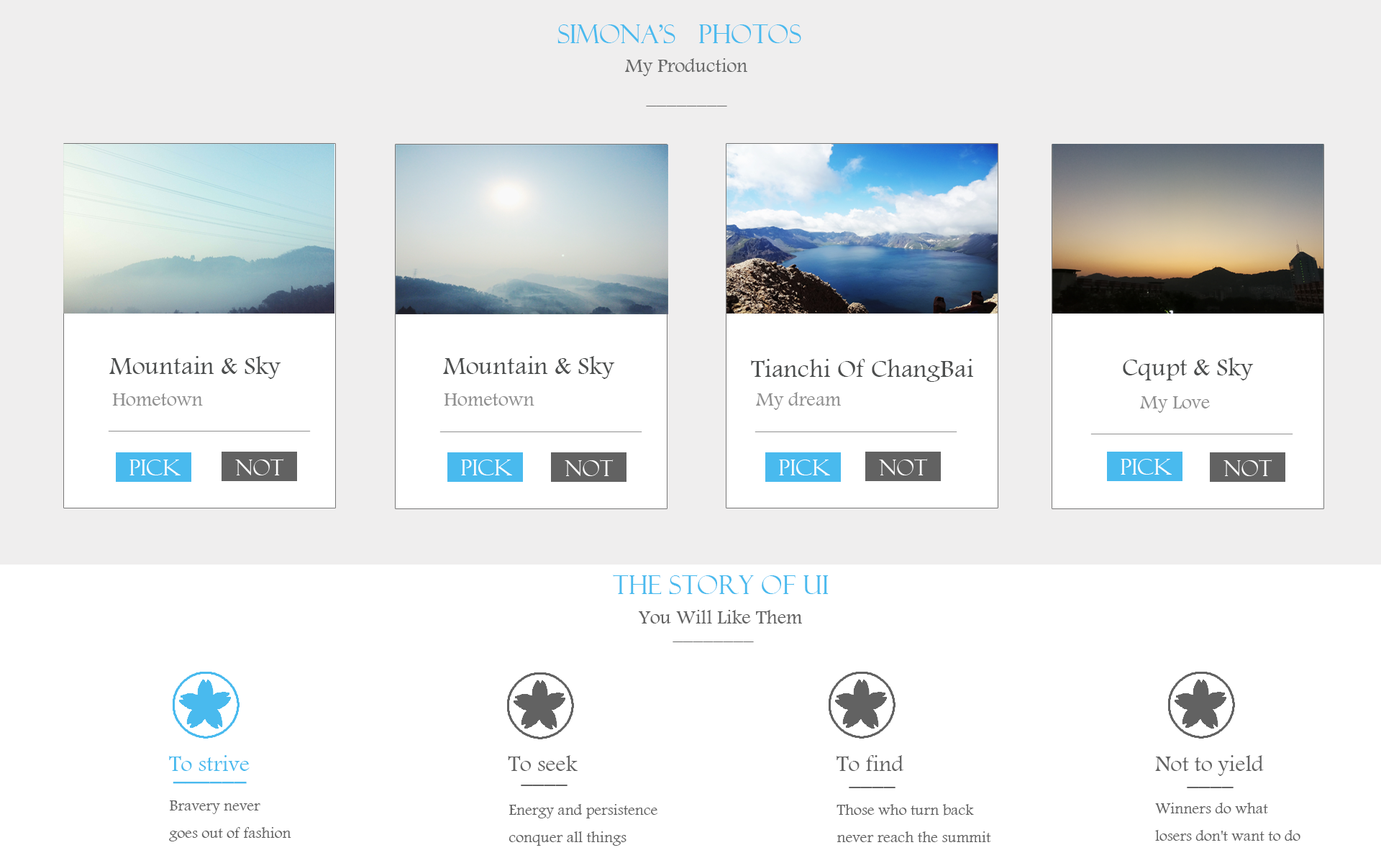
<style>
.page{position:relative;width:1381px;height:863px;background:#ffffff}
.page>*{position:absolute;margin:0}
.t1{font:25.9px "FelixTitlingMT";color:#49baee}
.t2{font:20.1px "FootlightMTLight";color:#686969}
.t3{font:25.9px "FootlightMTLight";color:#4c4e4e}
.t4{font:20.1px "FootlightMTLight";color:#909090}
.t5{font:20.1px "FootlightMTLight";color:#626262}
.t6{font:23px "FootlightMTLight";color:#49baee}
.t7{font:23px "FootlightMTLight";color:#626262}
.t8{font:23px "FootlightMTLight";color:#49baee;font-weight:bold}
.t9{font:15.8px "FootlightMTLight";color:#626262}
</style>
<div class="page">
<p class="t1" style="left:558px;top:24px;width:243px;height:19px">simona’s   photos</p>
<p class="t2" style="left:625px;top:58px;width:122px;height:18px">My Production</p>
<p class="t2" style="left:646px;top:106px;width:81px;height:0px">________</p>
<p class="t3" style="left:109px;top:356px;width:172px;height:23px">Mountain &amp; Sky</p>
<p class="t3" style="left:443px;top:356px;width:172px;height:23px">Mountain &amp; Sky</p>
<p class="t3" style="left:751px;top:359px;width:222px;height:23px">Tianchi Of ChangBai</p>
<p class="t3" style="left:1123px;top:358px;width:131px;height:23px">Cqupt &amp; Sky</p>
<p class="t4" style="left:112px;top:394px;width:91px;height:12px">Hometown</p>
<p class="t4" style="left:444px;top:394px;width:91px;height:12px">Hometown</p>
<p class="t4" style="left:756px;top:392px;width:85px;height:18px">My dream</p>
<p class="t4" style="left:1140px;top:396px;width:70px;height:17px">My Love</p>
<p class="t4" style="left:108px;top:431px;width:203px;height:1px">____________________</p>
<p class="t4" style="left:440px;top:432px;width:202px;height:0px">____________________</p>
<p class="t4" style="left:755px;top:432px;width:203px;height:0px">____________________</p>
<p class="t4" style="left:1091px;top:434px;width:202px;height:1px">____________________</p>
<p class="t1" style="left:613px;top:575px;width:216px;height:19px">THE STORY OF UI</p>
<p class="t5" style="left:638px;top:610px;width:164px;height:14px">You Will Like Them</p>
<p class="t2" style="left:673px;top:642px;width:81px;height:0px">________</p>
<p class="t6" style="left:169px;top:755px;width:81px;height:16px">To strive</p>
<p class="t7" style="left:508px;top:755px;width:70px;height:16px">To seek</p>
<p class="t7" style="left:837px;top:755px;width:67px;height:16px">To find</p>
<p class="t7" style="left:1155px;top:755px;width:109px;height:21px">Not to yield</p>
<p class="t8" style="left:173px;top:782px;width:74px;height:2px">______</p>
<p class="t7" style="left:521px;top:785px;width:47px;height:1px">____</p>
<p class="t7" style="left:849px;top:787px;width:47px;height:1px">____</p>
<p class="t7" style="left:1187px;top:787px;width:47px;height:1px">____</p>
<p class="t9" style="left:169px;top:801px;width:122px;height:41px">Bravery never <br>goes out of fashion</p>
<p class="t9" style="left:509px;top:804px;width:149px;height:42px">Energy and persistence<br>conquer all things</p>
<p class="t9" style="left:837px;top:804px;width:154px;height:38px">Those who turn back<br>never reach the summit</p>
<p class="t9" style="left:1155px;top:803px;width:146px;height:38px">Winners do what<br>losers don't want to do</p>
</div>
